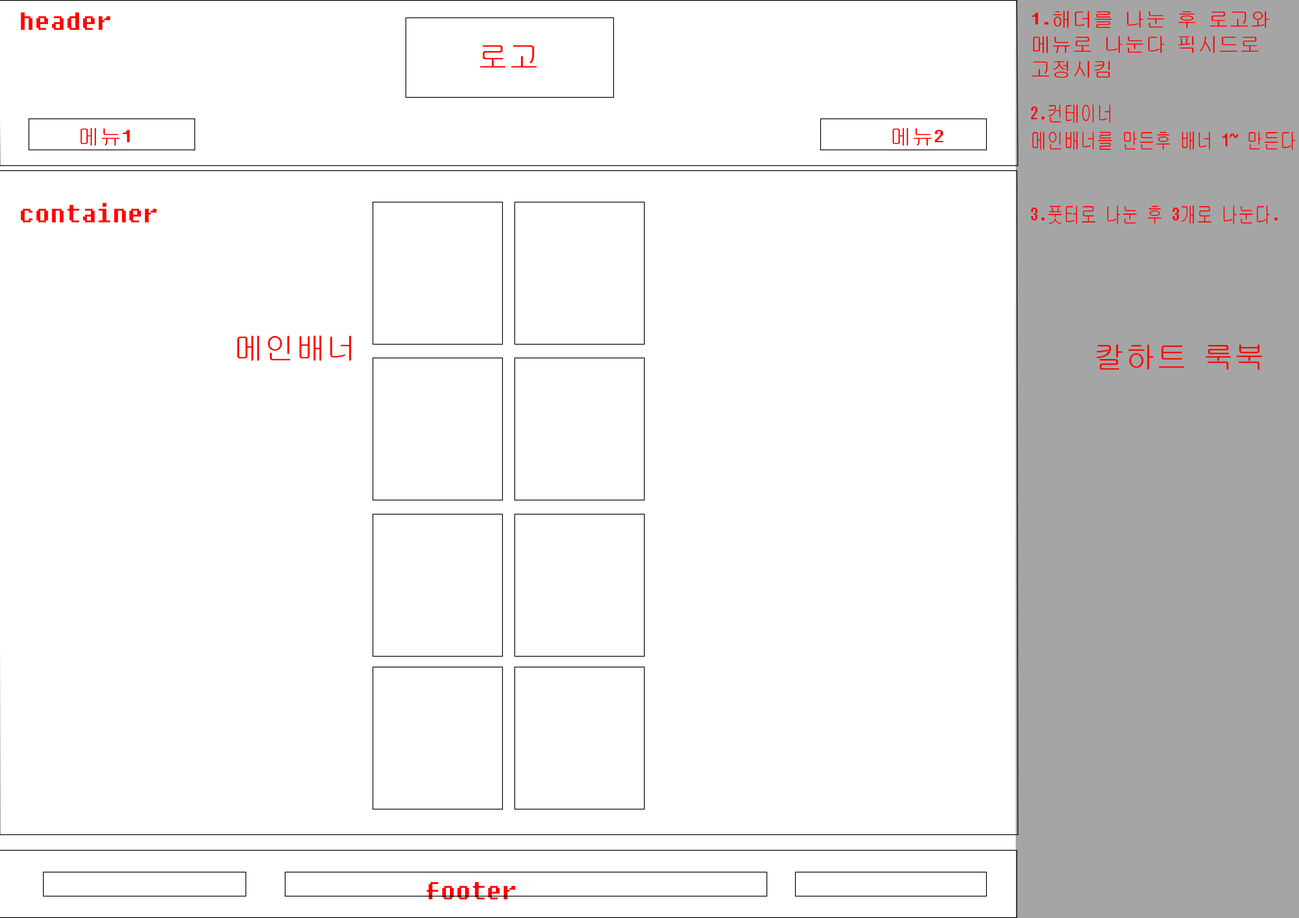
<style>
.page{position:relative;width:1299px;height:918px;background:#ffffff}
.page>*{position:absolute;margin:0}
.t1{font:31.1px "Fixedsys";color:#ff0000}
.t2{font:20.8px "Fixedsys";color:#ff0000}
.t3{font:22.6px "Fixedsys";color:#ff0000;scale:0.74 1}
.t4{font:22px "Fixedsys";color:#ff0000}
.t5{font:30.9px "Fixedsys";color:#ff0000}
</style>
<div class="page">
<p class="t1" style="left:21px;top:12px;width:89px;height:18px">header</p>
<p class="t2" style="left:1031px;top:11px;width:238px;height:67px">1.해더를 나눈 후 로고와 <br>메뉴로 나눈다 픽시드로 <br>고정시킴</p>
<p class="t1" style="left:480px;top:45px;width:56px;height:23px">로고</p>
<p class="t3" style="left:1031px;top:104px;width:264px;height:46px">2.컨테이너 <br>메인배너를 만든후 배너 1~ 만든다</p>
<p class="t4" style="left:80px;top:128px;width:50px;height:18px">메뉴1</p>
<p class="t4" style="left:892px;top:128px;width:51px;height:18px">메뉴2</p>
<p class="t1" style="left:21px;top:203px;width:136px;height:20px">container</p>
<p class="t3" style="left:1031px;top:205px;width:246px;height:19px">3.풋터로 나눈 후 3개로 나눈다.</p>
<p class="t1" style="left:237px;top:335px;width:114px;height:26px">메인배너</p>
<p class="t1" style="left:1096px;top:344px;width:166px;height:26px">칼하트 룩북</p>
<p class="t5" style="left:426px;top:882px;width:89px;height:18px">footer</p>
</div>
